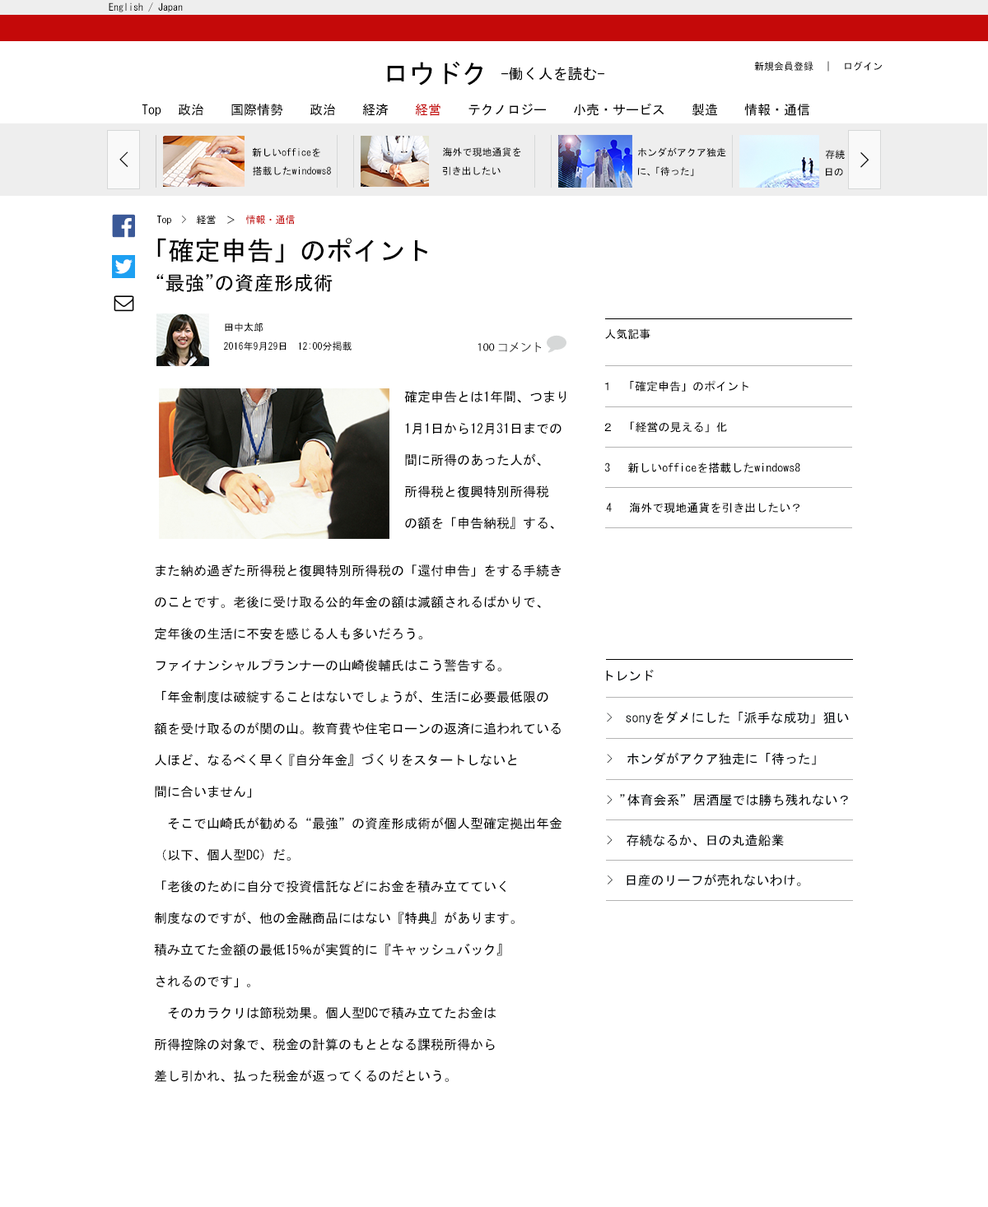
<style>
.page{position:relative;width:988px;height:1207px;background:#ffffff}
.page>*{position:absolute;margin:0}
.t1{font:9.9px "MS-Gothic";color:#000000}
.t2{font:14.8px "MS-Gothic";color:#000000}
.t3{font:26.3px "MS-Gothic";color:#000000}
.t4{font:13.2px "MS-Gothic";color:#000000}
.t5{font:13.2px "MS-Gothic";color:#c40909}
.t6{font:19.8px "MS-Gothic";color:#000000}
.t7{font:9.9px "MS-Gothic";color:#c40909}
.t8{font:11.5px "MS-Gothic";color:#000000}
.t9{font:11.5px "KozGoPr6N-Regular";color:#000000}
.t10{font:11.5px "MyriadPro-Regular";color:#000000}
.t11{font:13.2px "MS-Gothic";color:#010508}
.t12{font:11.5px "MS-Gothic";color:#010508}
</style>
<div class="page">
<p class="t1" style="left:109px;top:2px;width:74px;height:10px">English / Japan</p>
<p class="t2" style="left:387px;top:61px;width:217px;height:25px"><span class="t3">ロウドク </span>-働く人を読む-</p>
<p class="t1" style="left:754px;top:61px;width:128px;height:11px">新規会員登録　｜　ログイン</p>
<p class="t4" style="left:142px;top:103px;width:667px;height:13px">Top  政治 国際情勢　　政治　　経済　　<span class="t5">経営</span>　　テクノロジー　　小売・サービス　　製造　　情報・通信</p>
<p class="t1" style="left:252px;top:147px;width:68px;height:10px">新しいofficeを</p>
<p class="t1" style="left:443px;top:147px;width:78px;height:10px">海外で現地通貨を</p>
<p class="t1" style="left:638px;top:147px;width:88px;height:10px">ホンダがアクア独走</p>
<p class="t1" style="left:825px;top:150px;width:19px;height:10px">存続</p>
<p class="t6" style="left:119px;top:151px;width:9px;height:16px">&lt;</p>
<p class="t6" style="left:860px;top:152px;width:9px;height:16px">&gt;</p>
<p class="t1" style="left:253px;top:166px;width:78px;height:10px">搭載したwindows8</p>
<p class="t1" style="left:442px;top:166px;width:58px;height:9px">引き出したい</p>
<p class="t1" style="left:638px;top:166px;width:56px;height:10px">に、「待った」</p>
<p class="t1" style="left:825px;top:168px;width:18px;height:8px">日の</p>
<p class="t1" style="left:157px;top:215px;width:138px;height:10px">Top  &gt;  経営　＞　<span class="t7">情報・通信</span></p>
<p class="t3" style="left:157px;top:238px;width:271px;height:25px">「確定申告」のポイント</p>
<p class="t6" style="left:156px;top:273px;width:177px;height:19px">“最強”の資産形成術</p>
<p class="t1" style="left:225px;top:323px;width:38px;height:10px">田中太郎</p>
<p class="t8" style="left:605px;top:328px;width:45px;height:12px">人気記事</p>
<p class="t1" style="left:224px;top:342px;width:127px;height:9px">2016年9月29日　12:00分掲載</p>
<p class="t9" style="left:477px;top:342px;width:65px;height:10px"><span class="t10">100 </span>コメント</p>
<p class="t8" style="left:604px;top:380px;width:144px;height:12px">１　　「確定申告」のポイント</p>
<p class="t4" style="left:154px;top:390px;width:412px;height:692px">確定申告とは1年間、つまり<br><br>        　1月1日から12月31日までの<br><br>        　間に所得のあった人が、<br><br>        　所得税と復興特別所得税<br><br>        　の額を「申告納税』する、<br><br><br>また納め過ぎた所得税と復興特別所得税の「還付申告」をする手続き<br><br>のことです。老後に受け取る公的年金の額は減額されるばかりで、<br><br>定年後の生活に不安を感じる人も多いだろう。<br><br>ファイナンシャルプランナーの山崎俊輔氏はこう警告する。<br><br>「年金制度は破綻することはないでしょうが、生活に必要最低限の<br><br>額を受け取るのが関の山。教育費や住宅ローンの返済に追われている<br><br>人ほど、なるべく早く『自分年金』づくりをスタートしないと<br><br>間に合いません」<br><br>　そこで山崎氏が勧める“最強”の資産形成術が個人型確定拠出年金<br><br>（以下、個人型DC）だ。<br><br>「老後のために自分で投資信託などにお金を積み立てていく<br><br>制度なのですが、他の金融商品にはない『特典』があります。<br><br>積み立てた金額の最低15％が実質的に『キャッシュバック』<br><br>されるのです」｡<br><br>　そのカラクリは節税効果。個人型DCで積み立てたお金は<br><br>所得控除の対象で、税金の計算のもととなる課税所得から<br><br>差し引かれ、払った税金が返ってくるのだという。</p>
<p class="t8" style="left:604px;top:421px;width:123px;height:12px">２　「経営の見える」化</p>
<p class="t8" style="left:604px;top:463px;width:196px;height:10px">3   新しいofficeを搭載したwindows8</p>
<p class="t8" style="left:606px;top:502px;width:193px;height:12px">4　 海外で現地通貨を引き出したい？</p>
<p class="t11" style="left:606px;top:670px;width:47px;height:11px">トレンド</p>
<p class="t11" style="left:607px;top:711px;width:242px;height:13px"><span class="t12">&gt; </span>sonyをダメにした「派手な成功」狙い</p>
<p class="t11" style="left:607px;top:752px;width:209px;height:13px"><span class="t12">&gt; 　</span>ホンダがアクア独走に「待った」</p>
<p class="t11" style="left:607px;top:794px;width:241px;height:13px"><span class="t12">&gt;</span> ”体育会系”居酒屋では勝ち残れない？</p>
<p class="t11" style="left:607px;top:835px;width:177px;height:12px"><span class="t12">&gt; 　</span>存続なるか、日の丸造船業</p>
<p class="t11" style="left:607px;top:874px;width:194px;height:12px"><span class="t12">&gt;　</span>日産のリーフが売れないわけ。</p>
</div>
